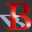
<style>
.page{position:relative;width:32px;height:32px}
.page>*{position:absolute;margin:0}
.t1{font:42px "Garamond-Bold"}
</style>
<div class="page">
<p class="t1" style="left:6px;top:3px;width:26px;height:27px">B</p>
</div>
